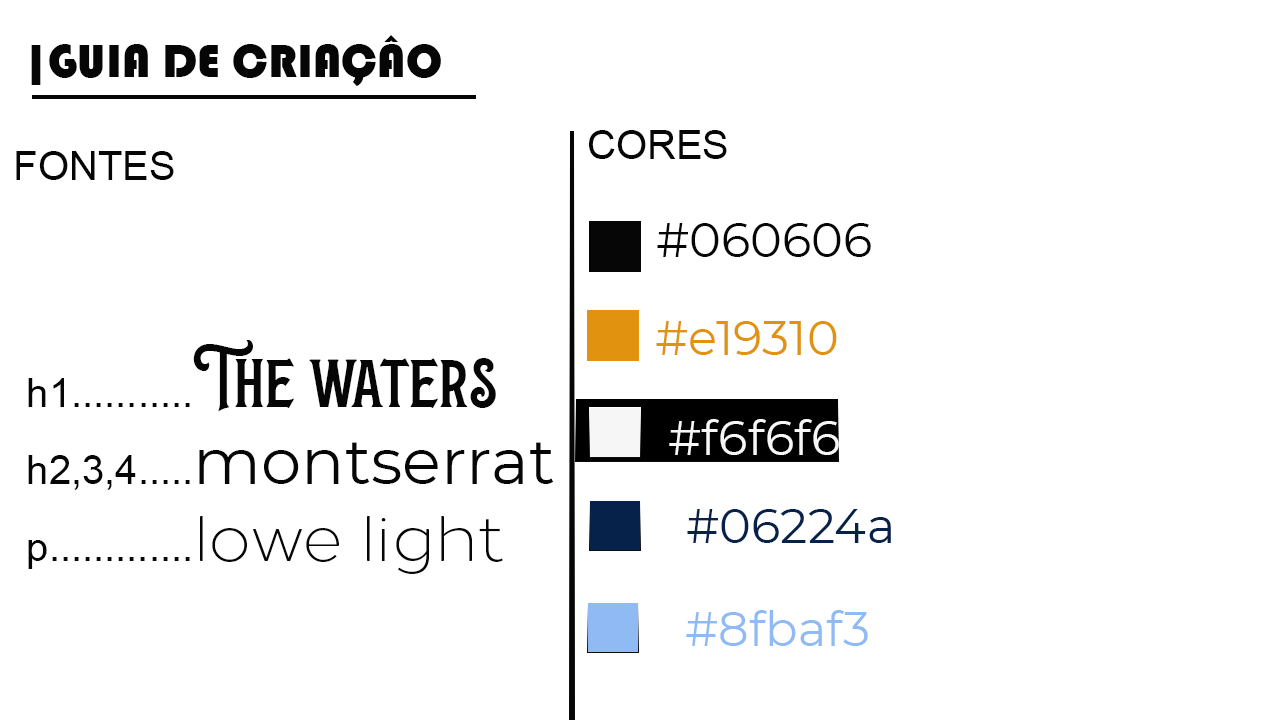
<style>
.page{position:relative;width:1280px;height:720px;background:#ffffff}
.page>*{position:absolute;margin:0}
.t1{font:48px "Bauhaus93";color:#060606}
.t2{font:170.7px "Bauhaus93";color:#060606}
.t3{font:40px "ArialMT";color:#060606}
.t4{font:48px "Montserrat-Regular";color:#060606}
.t5{font:48px "Montserrat-Regular";color:#e19310}
.t6{font:80px "TheWantersDEMO";color:#060606}
.t7{font:64px "Montserrat-Regular";color:#060606}
.t8{font:64px "Loew-Light";color:#060606}
.t9{font:48px "Montserrat-Regular";color:#f6f6f6}
.t10{font:48px "Montserrat-Regular";color:#06224a}
.t11{font:48px "Montserrat-Regular";color:#8fbaf3}
</style>
<div class="page">
<p class="t1" style="left:31px;top:35px;width:410px;height:51px"><span class="t2"><br></span>|GUIA DE CRIAÇÂO</p>
<p class="t3" style="left:589px;top:130px;width:138px;height:29px">CORES</p>
<p class="t3" style="left:16px;top:151px;width:158px;height:29px">FONTES</p>
<p class="t4" style="left:657px;top:223px;width:214px;height:34px">#060606</p>
<p class="t5" style="left:656px;top:321px;width:181px;height:34px">#e19310</p>
<p class="t3" style="left:28px;top:340px;width:526px;height:234px">h1...........<span class="t6">The waters<br></span>h2,3,4.....<span class="t7">montserrat<br></span>p.............<span class="t8">lowe light</span></p>
<p class="t9" style="left:669px;top:419px;width:170px;height:36px">#f6f6f6</p>
<p class="t10" style="left:687px;top:509px;width:204px;height:34px">#06224a</p>
<p class="t11" style="left:686px;top:610px;width:182px;height:36px">#8fbaf3</p>
</div>
